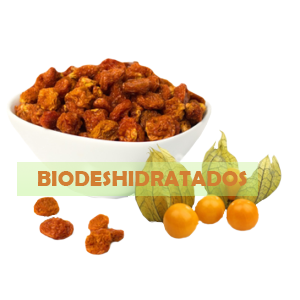
<style>
.page{position:relative;width:300px;height:300px;background:#ffffff}
.page>*{position:absolute;margin:0}
.t1{font:22px "BerlinSansFBDemi-Bold";color:#d27e33}
</style>
<div class="page">
<p class="t1" style="left:38px;top:171px;width:209px;height:15px">BIODESHIDRATADOS</p>
</div>
